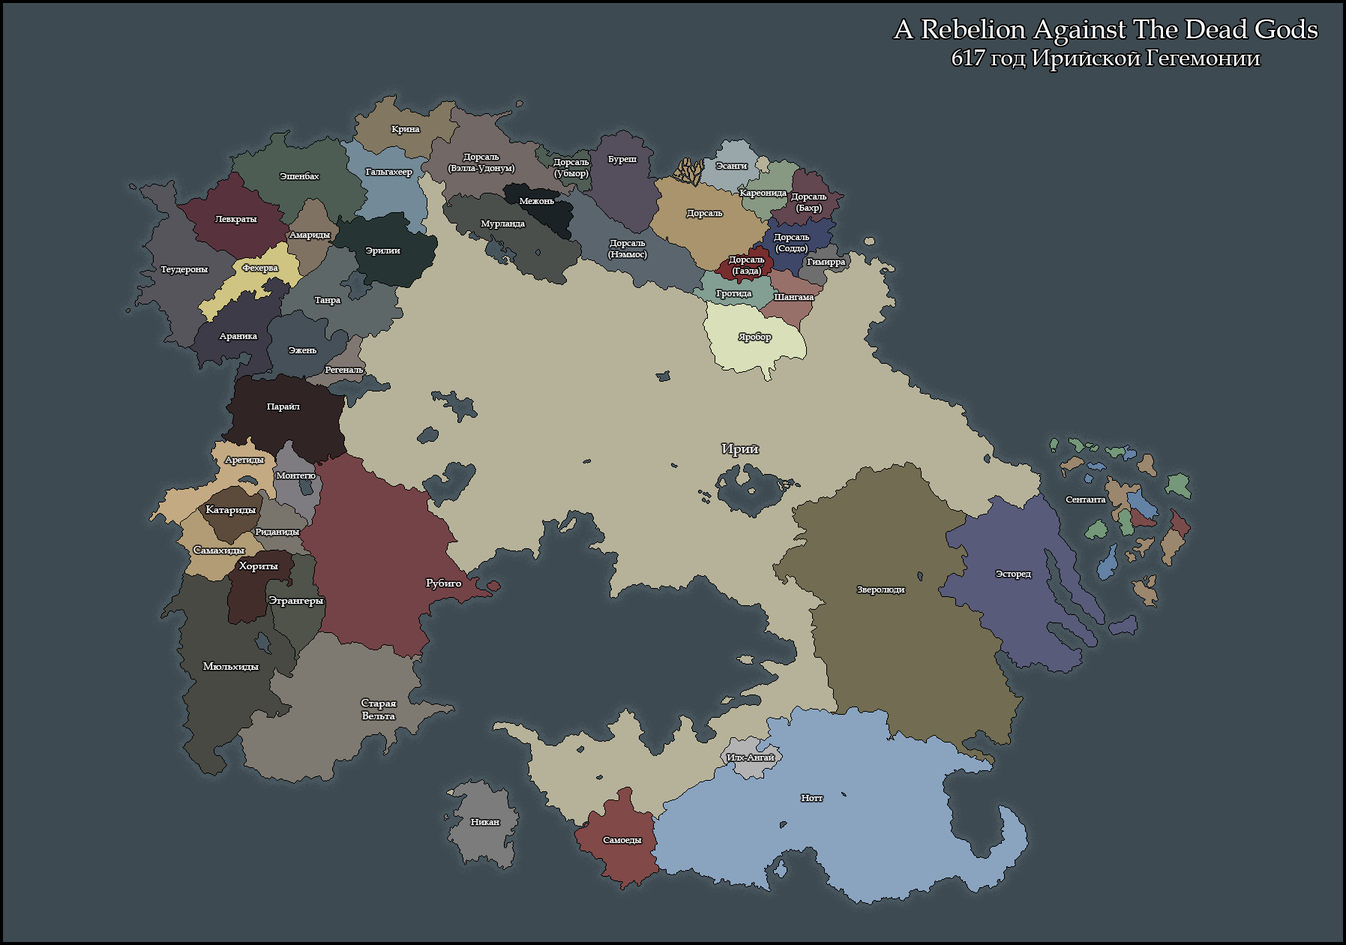
<style>
.page{position:relative;width:1346px;height:945px;background:#3e4a51}
.page>*{position:absolute;margin:0}
.t1{font:27px "BookAntiqua";color:#ffffff}
.t2{font:22.5px "BookAntiqua";color:#ffffff}
.t3{font:9px "BookAntiqua";color:#ffffff}
.t4{font:13.5px "BookAntiqua";color:#ffffff}
.t5{font:10.5px "BookAntiqua";color:#ffffff}
</style>
<div class="page">
<p class="t1" style="left:893px;top:19px;width:425px;height:52px;text-align:center">A Rebelion Against The Dead Gods<br><span class="t2">617 год Ирийской Гегемонии</span></p>
<p class="t3" style="left:392px;top:126px;width:28px;height:8px">Крина</p>
<p class="t3" style="left:448px;top:154px;width:66px;height:19px;text-align:center">Дорсаль<br>(Вэлла-Удонум)</p>
<p class="t3" style="left:554px;top:159px;width:36px;height:19px;text-align:center">Дорсаль<br>(Убыор)</p>
<p class="t3" style="left:608px;top:156px;width:29px;height:8px">Буреш</p>
<p class="t3" style="left:280px;top:172px;width:40px;height:7px">Эшенбах</p>
<p class="t3" style="left:366px;top:169px;width:46px;height:8px">Гальгахеер</p>
<p class="t3" style="left:716px;top:163px;width:31px;height:6px">Эсанги</p>
<p class="t3" style="left:520px;top:198px;width:34px;height:6px">Межонь</p>
<p class="t3" style="left:740px;top:190px;width:47px;height:8px">Кареонида</p>
<p class="t3" style="left:791px;top:194px;width:36px;height:19px;text-align:center">Дорсаль<br>(Бахр)</p>
<p class="t3" style="left:215px;top:216px;width:42px;height:8px">Левкраты</p>
<p class="t3" style="left:481px;top:220px;width:44px;height:9px">Мурланда</p>
<p class="t3" style="left:687px;top:210px;width:36px;height:8px">Дорсаль</p>
<p class="t3" style="left:290px;top:232px;width:40px;height:8px">Амариды</p>
<p class="t3" style="left:608px;top:240px;width:39px;height:20px;text-align:center">Дорсаль<br>(Нэммос)</p>
<p class="t3" style="left:774px;top:234px;width:36px;height:20px;text-align:center">Дорсаль<br>(Соддо)</p>
<p class="t3" style="left:366px;top:248px;width:34px;height:8px">Эрилии</p>
<p class="t3" style="left:729px;top:256px;width:36px;height:20px;text-align:center">Дорсаль<br>(Гаэда)</p>
<p class="t3" style="left:160px;top:266px;width:48px;height:8px">Теудероны</p>
<p class="t3" style="left:242px;top:265px;width:36px;height:8px">Фехерва</p>
<p class="t3" style="left:807px;top:259px;width:39px;height:8px">Гимирра</p>
<p class="t3" style="left:716px;top:290px;width:36px;height:8px">Гротида</p>
<p class="t3" style="left:774px;top:294px;width:40px;height:6px">Шангама</p>
<p class="t3" style="left:315px;top:297px;width:25px;height:8px">Танра</p>
<p class="t3" style="left:219px;top:333px;width:38px;height:8px">Араника</p>
<p class="t3" style="left:739px;top:333px;width:32px;height:9px">Яробор</p>
<p class="t3" style="left:289px;top:347px;width:27px;height:6px">Эжень</p>
<p class="t3" style="left:326px;top:367px;width:37px;height:6px">Регеналь</p>
<p class="t3" style="left:267px;top:404px;width:33px;height:8px">Парайл</p>
<p class="t4" style="left:722px;top:444px;width:36px;height:13px">Ирий</p>
<p class="t3" style="left:225px;top:457px;width:39px;height:8px">Аретиды</p>
<p class="t3" style="left:277px;top:472px;width:39px;height:6px">Монтегю</p>
<p class="t3" style="left:1066px;top:496px;width:40px;height:6px">Сентанта</p>
<p class="t5" style="left:206px;top:506px;width:50px;height:10px">Катариды</p>
<p class="t3" style="left:256px;top:529px;width:43px;height:7px">Риданиды</p>
<p class="t5" style="left:194px;top:546px;width:50px;height:9px">Самахиды</p>
<p class="t5" style="left:239px;top:562px;width:39px;height:10px">Хориты</p>
<p class="t5" style="left:426px;top:579px;width:35px;height:11px">Рубиго</p>
<p class="t3" style="left:996px;top:571px;width:35px;height:8px">Эсторед</p>
<p class="t3" style="left:857px;top:586px;width:48px;height:9px">Зверолюди</p>
<p class="t5" style="left:269px;top:596px;width:54px;height:11px">Этрангеры</p>
<p class="t5" style="left:203px;top:662px;width:56px;height:9px">Мюльхиды</p>
<p class="t5" style="left:362px;top:699px;width:35px;height:20px;text-align:center">Старая<br>Вельта</p>
<p class="t3" style="left:727px;top:754px;width:48px;height:6px">Илх-Ангай</p>
<p class="t3" style="left:802px;top:795px;width:21px;height:6px">Нотт</p>
<p class="t3" style="left:471px;top:819px;width:29px;height:6px">Никан</p>
<p class="t3" style="left:603px;top:837px;width:39px;height:7px">Самоеды</p>
</div>
